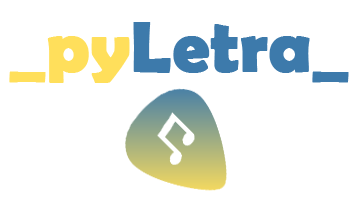
<style>
.page{position:relative;width:355px;height:217px;background:#ffffff}
.page>*{position:absolute;margin:0}
.t1{font:72px "BerlinSansFBDemi-Bold";color:#3d7aab;font-weight:bold}
.t2{font:72px "BerlinSansFBDemi-Bold";color:#ffdf5b;font-weight:bold}
</style>
<div class="page">
<p class="t1" style="left:47px;top:22px;width:263px;height:61px"><span class="t2">py</span>Letra</p>
<p class="t2" style="left:9px;top:71px;width:37px;height:12px">_</p>
<p class="t1" style="left:312px;top:71px;width:37px;height:12px">_</p>
</div>
